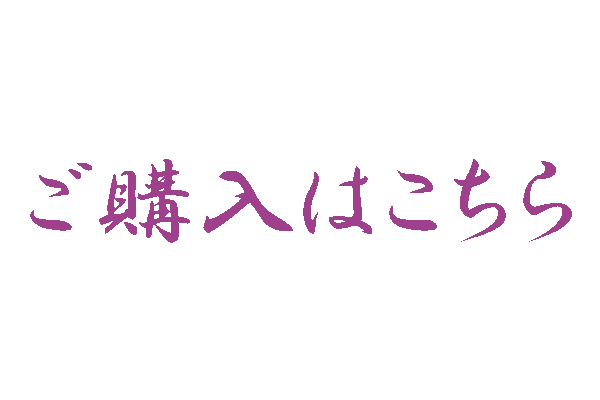
<style>
.page{position:relative;width:600px;height:400px;background:#ffffff}
.page>*{position:absolute;margin:0}
.t1{font:101.3px "HGPGyoshotai";color:#9f408c}
</style>
<div class="page">
<p class="t1" style="left:30px;top:159px;width:542px;height:84px">ご購入はこちら</p>
</div>
